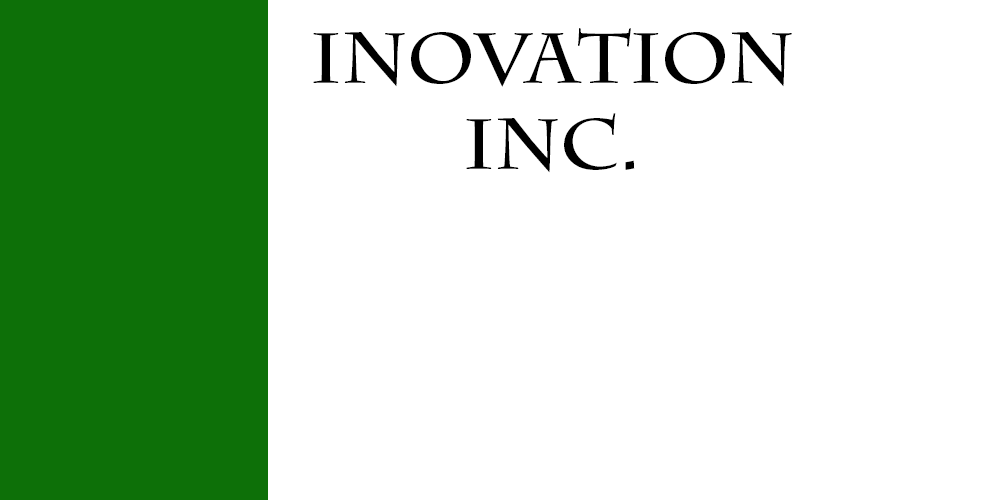
<style>
.page{position:relative;width:1000px;height:500px;background:#ffffff}
.page>*{position:absolute;margin:0}
.t1{font:72px "CharlemagneStd-Bold";color:#000000}
</style>
<div class="page">
<p class="t1" style="left:313px;top:28px;width:479px;height:145px;text-align:center">Inovation<br>INC.</p>
</div>
